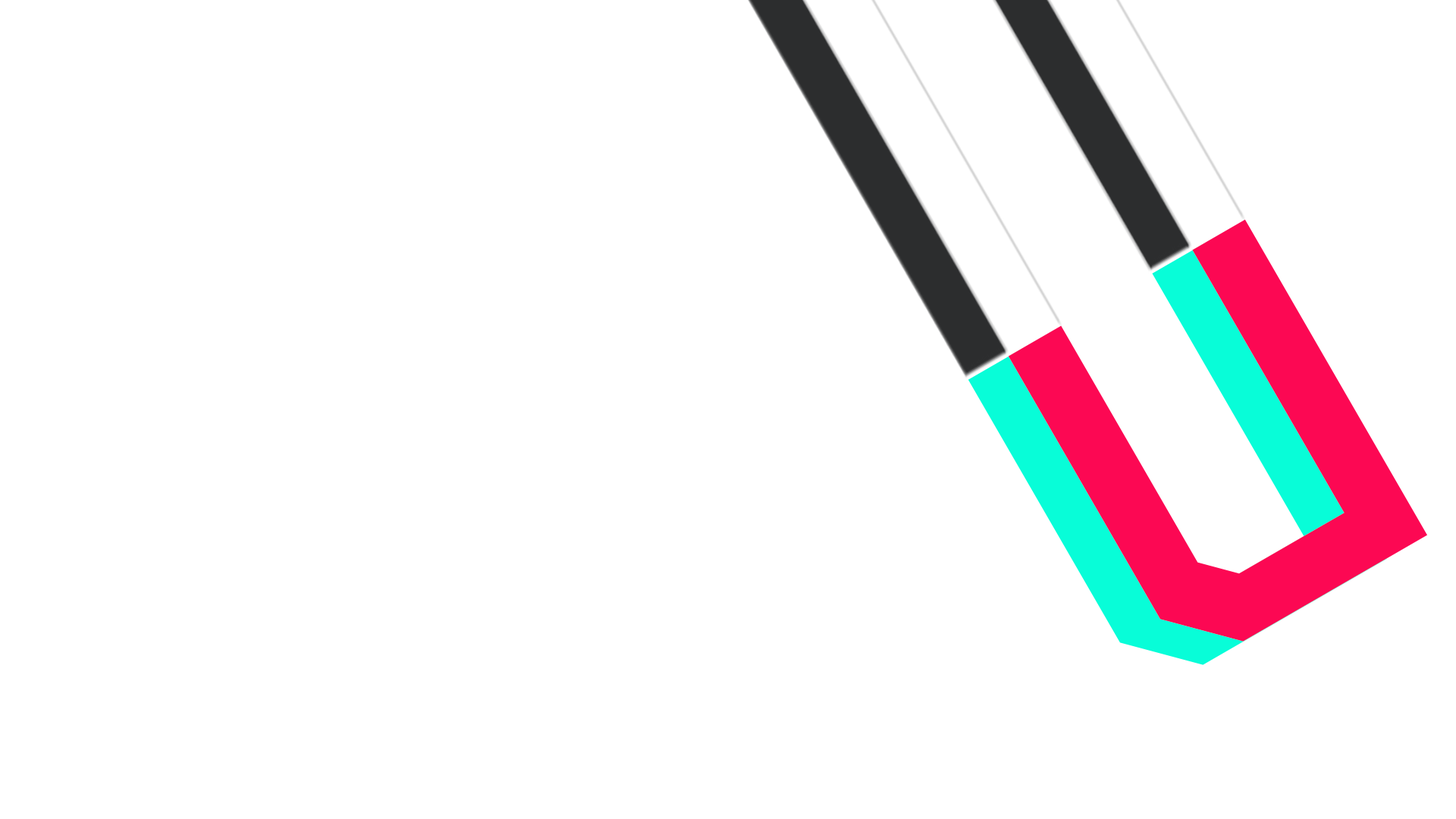
<style>
.page{position:relative;width:1456px;height:819px;background:#ffffff}
.page>*{position:absolute;margin:0}
.t1{font:485.6px "Big-Quicksand";color:#fc0853}
.t2{font:485.6px "Big-Quicksand"}
</style>
<div class="page">
<p class="t1" style="left:1008px;top:219px;width:419px;height:423px;rotate:-30deg">U</p>
<p class="t2" style="left:968px;top:243px;width:419px;height:422px;rotate:-30deg">U</p>
</div>
